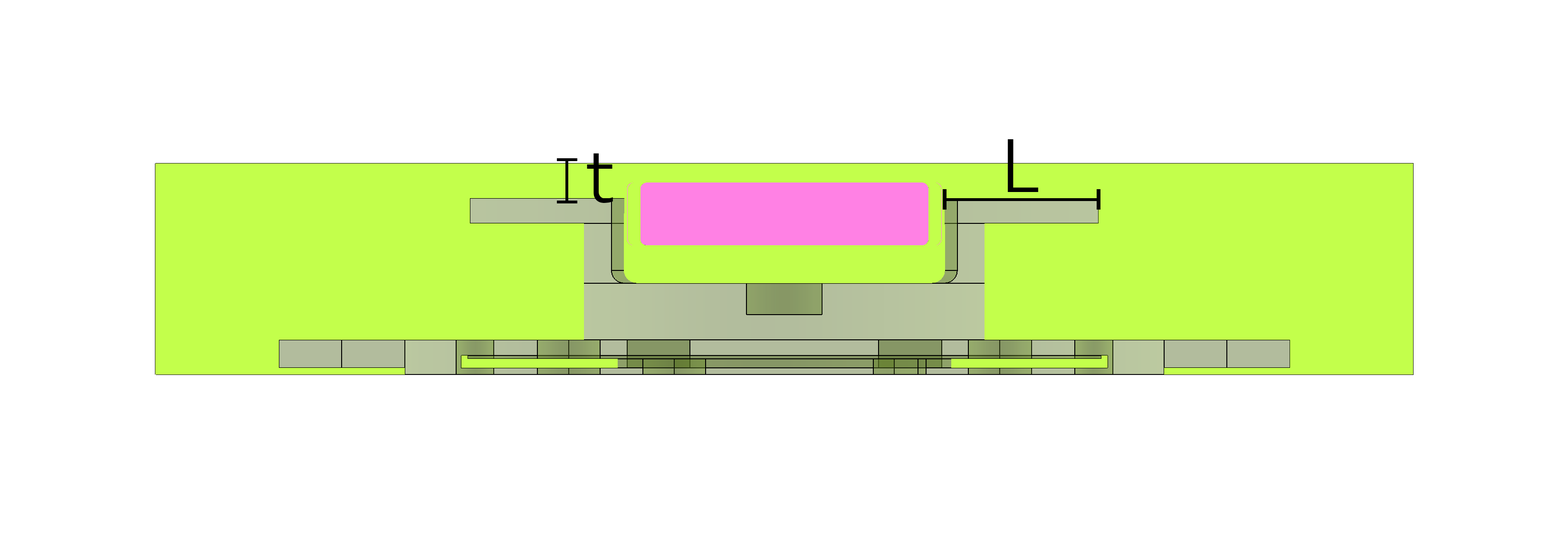
<style>
.page{position:relative;width:1568px;height:538px;background:#ffffff}
.page>*{position:absolute;margin:0}
.t1{font:71.3px "BwModelica-Regular";color:#000000}
</style>
<div class="page">
<p class="t1" style="left:1008px;top:139px;width:30px;height:53px">L</p>
<p class="t1" style="left:587px;top:153px;width:26px;height:50px">t</p>
</div>
